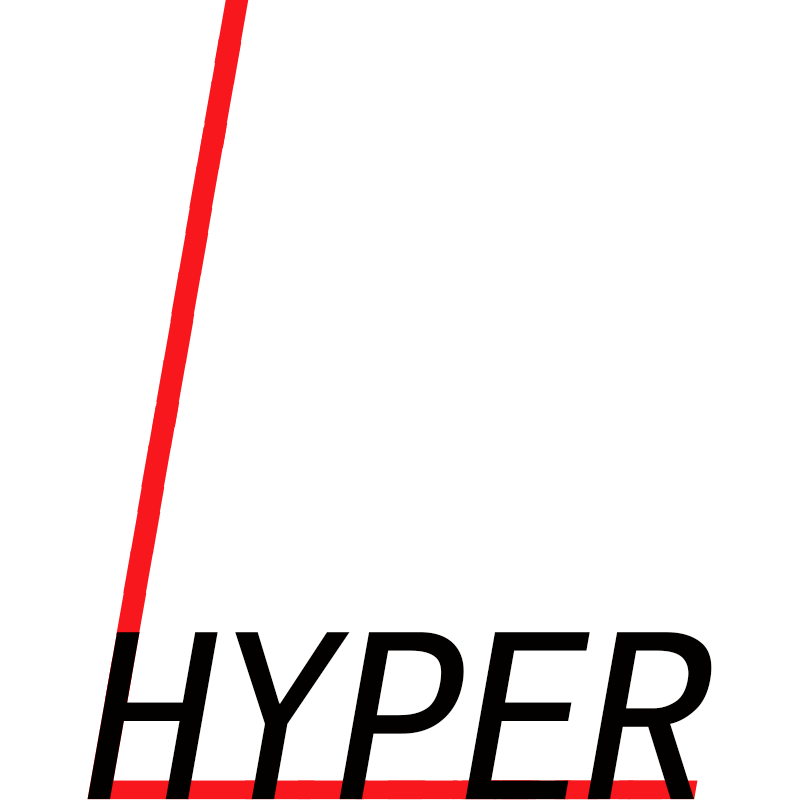
<style>
.page{position:relative;width:800px;height:800px;background:#ffffff}
.page>*{position:absolute;margin:0}
.t1{font:250px "SimHei";color:#030000;font-style:italic}
</style>
<div class="page">
<p class="t1" style="left:87px;top:632px;width:625px;height:168px">HYPER</p>
</div>
